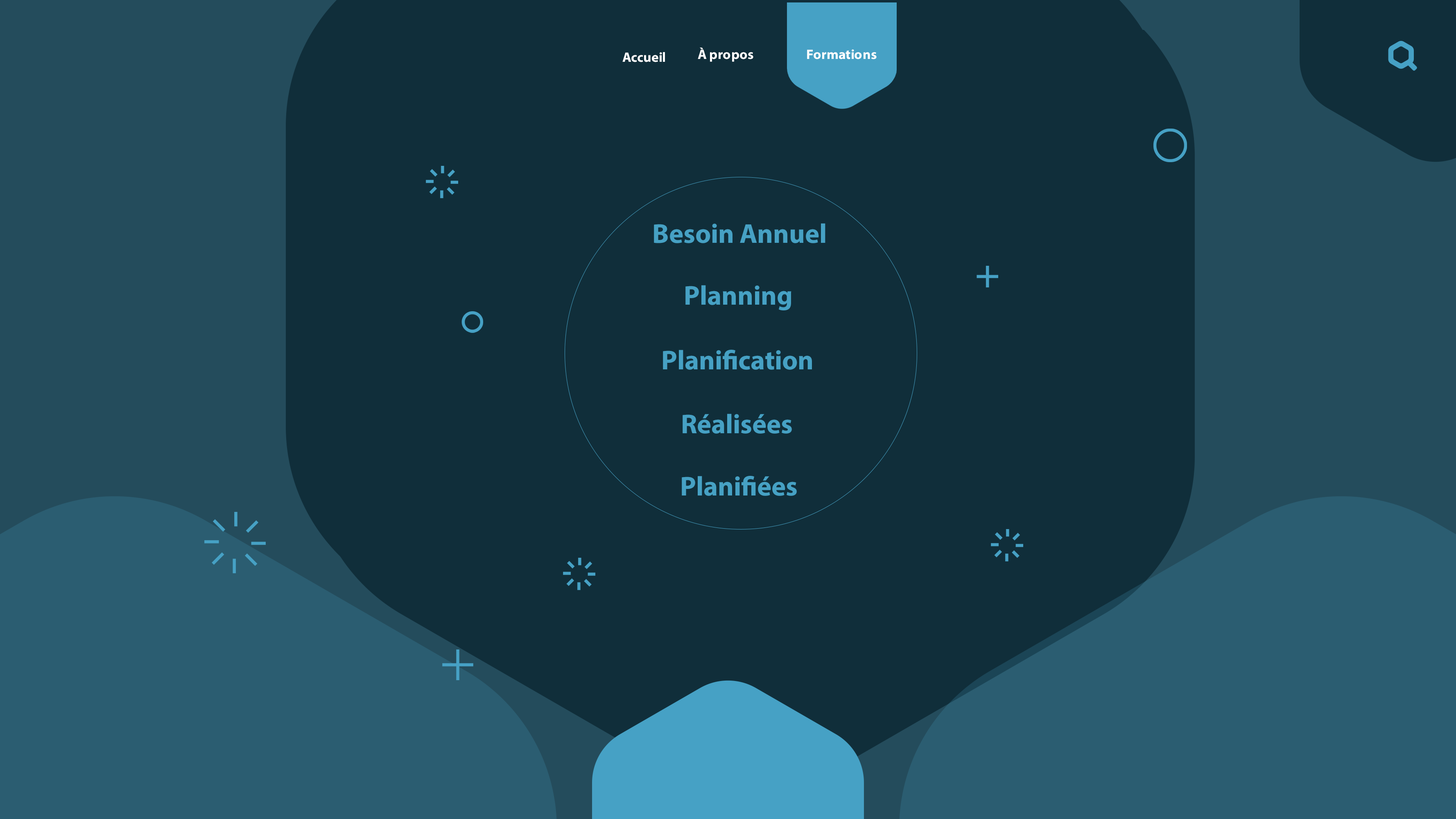
<style>
.page{position:relative;width:1456px;height:819px;background:#102e3a}
.page>*{position:absolute;margin:0}
.t1{font:13.6px "MyriadPro-Bold";color:#ffffff}
.t2{font:27.3px "MyriadPro-Bold";color:#46a1c4}
</style>
<div class="page">
<p class="t1" style="left:622px;top:52px;width:43px;height:10px">Accueil</p>
<p class="t1" style="left:698px;top:47px;width:55px;height:15px">À propos</p>
<p class="t1" style="left:807px;top:49px;width:70px;height:10px">Formations</p>
<p class="t2" style="left:654px;top:223px;width:171px;height:20px">Besoin Annuel</p>
<p class="t2" style="left:685px;top:285px;width:107px;height:25px">Planning</p>
<p class="t2" style="left:663px;top:350px;width:149px;height:20px">Planification</p>
<p class="t2" style="left:683px;top:414px;width:109px;height:20px">Réalisées</p>
<p class="t2" style="left:682px;top:476px;width:115px;height:20px">Planifiées</p>
</div>
